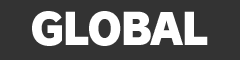
<style>
.page{position:relative;width:240px;height:60px;background:#333333}
.page>*{position:absolute;margin:0}
.t1{font:42.7px "RodinPro-UB";letter-spacing:-0.053em;color:#ffffff}
</style>
<div class="page">
<p class="t1" style="left:32px;top:11px;width:176px;height:35px">GLOBAL</p>
</div>
